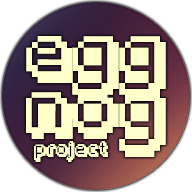
<style>
.page{position:relative;width:192px;height:192px;background:#ffffcc}
.page>*{position:absolute;margin:0}
.t1{font:46.9px "Fipps-Regular";color:#ffffcc}
.t2{font:12.5px "Fipps-Regular";color:#ffffcc}
</style>
<div class="page">
<p class="t1" style="left:26px;top:36px;width:140px;height:121px">egg<br>nog</p>
<p class="t2" style="left:34px;top:141px;width:74px;height:21px">project</p>
</div>
